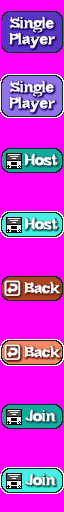
<style>
.page{position:relative;width:64px;height:512px;background:#ff00ff}
.page>*{position:absolute;margin:0}
.t1{font:15px/16px "Bundy-Regular";letter-spacing:-0.01em;color:#ffffff;font-weight:bold}
.t2{font:15px "Bundy-Regular";letter-spacing:-0.01em;color:#ffffff;font-weight:bold}
.t3{font:14px "SegoeUIEmoji";letter-spacing:-0.01em;color:#ffffff;font-weight:bold}
</style>
<div class="page">
<p class="t1" style="left:9px;top:16px;width:46px;height:33px;text-align:center">Single<br>Player</p>
<p class="t1" style="left:9px;top:80px;width:46px;height:33px;text-align:center">Single<br>Player</p>
<p class="t2" style="left:24px;top:153px;width:34px;height:13px">Host</p>
<p class="t2" style="left:24px;top:217px;width:34px;height:13px">Host</p>
<p class="t2" style="left:4px;top:280px;width:57px;height:16px"><span class="t3">↩️ </span>Back</p>
<p class="t2" style="left:4px;top:344px;width:57px;height:16px"><span class="t3">↩️ </span>Back</p>
<p class="t2" style="left:25px;top:410px;width:31px;height:12px">Join</p>
<p class="t2" style="left:25px;top:474px;width:31px;height:12px">Join</p>
</div>
